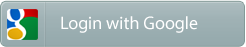
<style>
.page{position:relative;width:246px;height:47px}
.page>*{position:absolute;margin:0}
.t1{font:18px "MyriadPro-Regular";color:#ffffff}
</style>
<div class="page">
<p class="t1" style="left:61px;top:16px;width:137px;height:17px">Login with Google</p>
</div>
